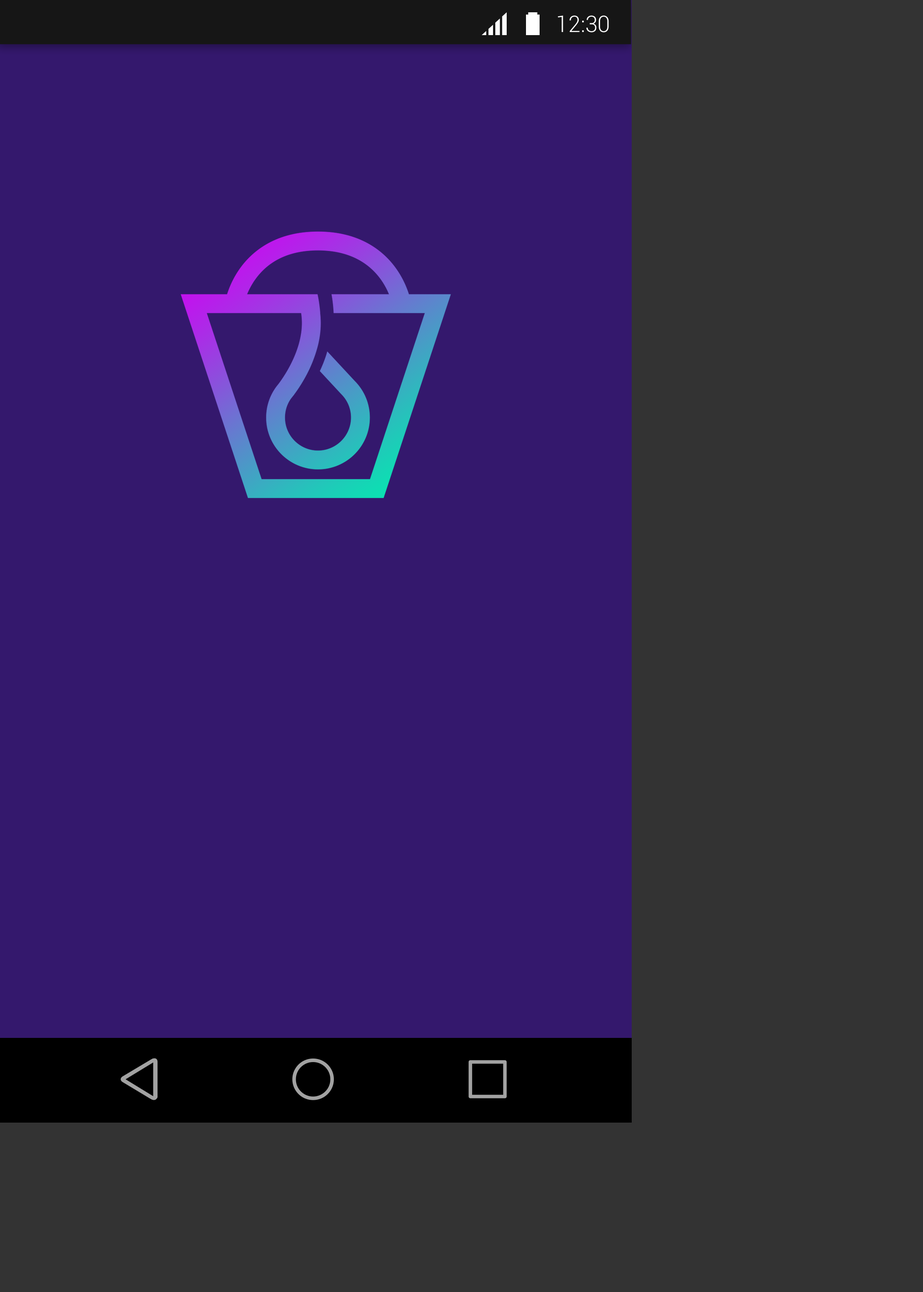
<style>
.page{position:relative;width:923px;height:1292px;background:#34186d}
.page>*{position:absolute;margin:0}
.t1{font:22.2px "Roboto-Light";color:#ffffff}
</style>
<div class="page">
<p class="t1" style="left:558px;top:15px;width:51px;height:17px">12:30</p>
</div>
